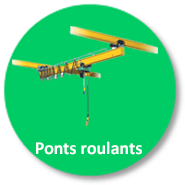
<style>
.page{position:relative;width:185px;height:185px;background:#00cc66}
.page>*{position:absolute;margin:0}
.t1{font:18px "Calibri-Bold";color:#ffffff}
</style>
<div class="page">
<p class="t1" style="left:36px;top:141px;width:106px;height:14px">Ponts roulants</p>
</div>
